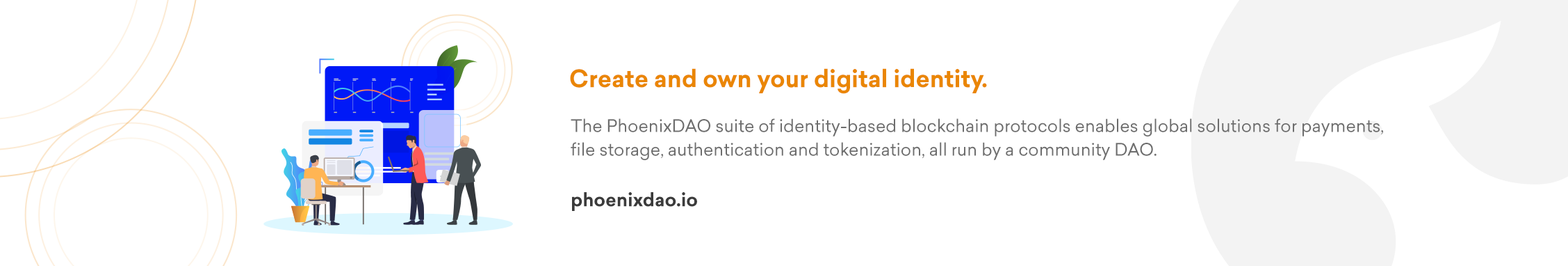
<style>
.page{position:relative;width:1568px;height:266px;background:#ffffff}
.page>*{position:absolute;margin:0}
.t1{font:23.7px "Sailec-Bold";color:#ea8604}
.t2{font:17px/23.7px "Sailec-Regular";color:#6d6d6d}
.t3{font:18.2px "Sailec-Bold";color:#3b3b3b}
</style>
<div class="page">
<p class="t1" style="left:570px;top:68px;width:417px;height:26px">Create and own your digital identity.</p>
<p class="t2" style="left:571px;top:118px;width:812px;height:42px">The PhoenixDAO suite of identity-based blockchain protocols enables global solutions for payments,<br>file storage, authentication and tokenization, all run by a community DAO.</p>
<p class="t3" style="left:572px;top:192px;width:125px;height:19px">phoenixdao.io</p>
</div>
